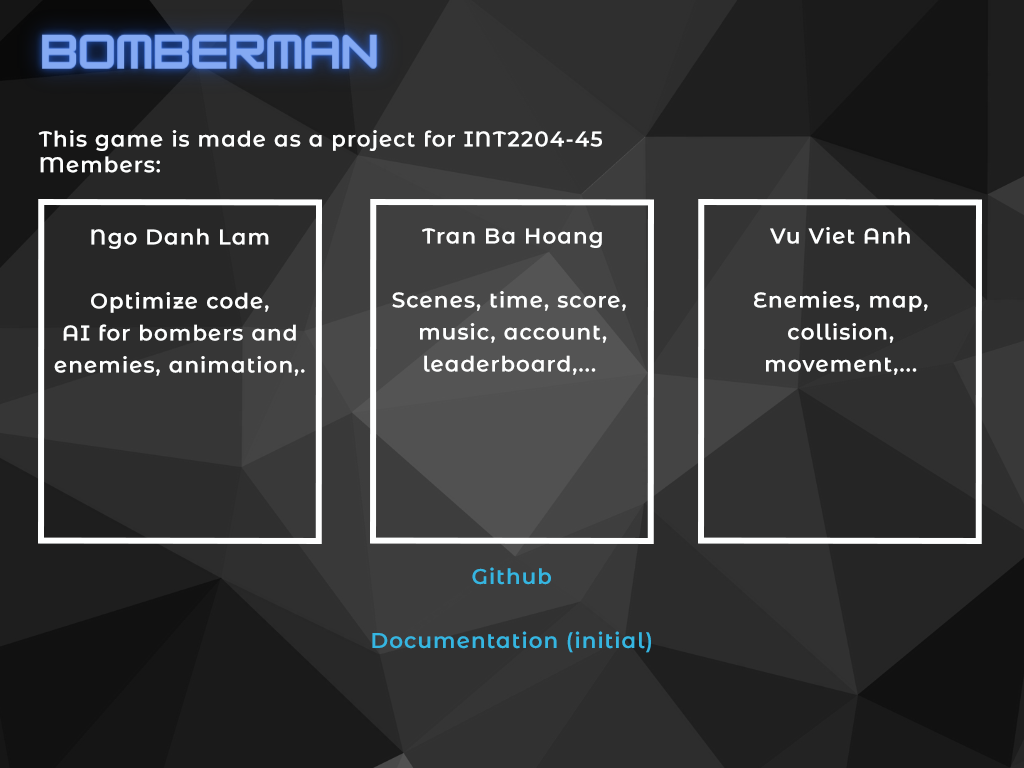
<style>
.page{position:relative;width:1024px;height:768px}
.page>*{position:absolute;margin:0}
.t1{font:21.3px "MontserratAlternates-SemiBold";letter-spacing:0.05em;color:#feffff}
.t2{font:21.3px/32px "MontserratAlternates-SemiBold";letter-spacing:0.05em;color:#feffff}
.t3{font:21.3px/32px "MontserratAlternates-SemiBold";letter-spacing:0.05em;color:#35b6e1}
</style>
<div class="page">
<p class="t1" style="left:38px;top:130px;width:564px;height:43px">This game is made as a project for INT2204-45<br>Members:</p>
<p class="t2" style="left:54px;top:228px;width:251px;height:148px;text-align:center">Ngo Danh Lam<br><br>Optimize code,<br>AI for bombers and<br>enemies, animation,.</p>
<p class="t2" style="left:392px;top:228px;width:234px;height:147px;text-align:center">Tran Ba Hoang<br><br>Scenes, time, score, <br>music, account,<br>leaderboard,...</p>
<p class="t2" style="left:754px;top:227px;width:174px;height:148px;text-align:center">Vu Viet Anh<br><br>Enemies, map,<br>collision,<br>movement,...</p>
<p class="t3" style="left:372px;top:567px;width:279px;height:86px;text-align:center">Github<br><br>Documentation (initial)</p>
</div>
